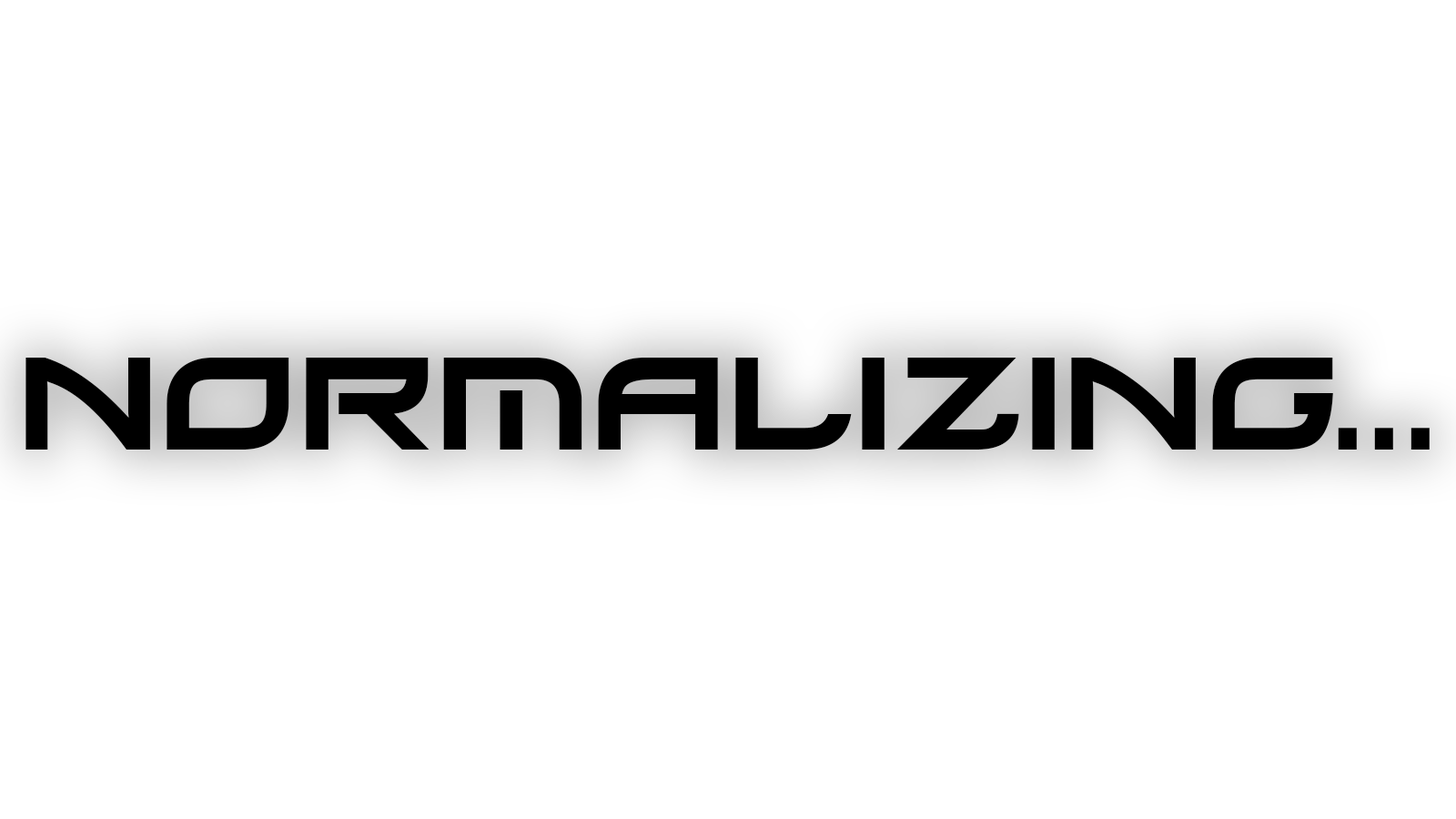
<style>
.page{position:relative;width:1456px;height:819px;background:#ffffff}
.page>*{position:absolute;margin:0}
.t1{font:131.4px "Xirod-Regular";color:#000000}
</style>
<div class="page">
<p class="t1" style="left:25px;top:358px;width:1405px;height:92px">Normalizing...</p>
</div>
